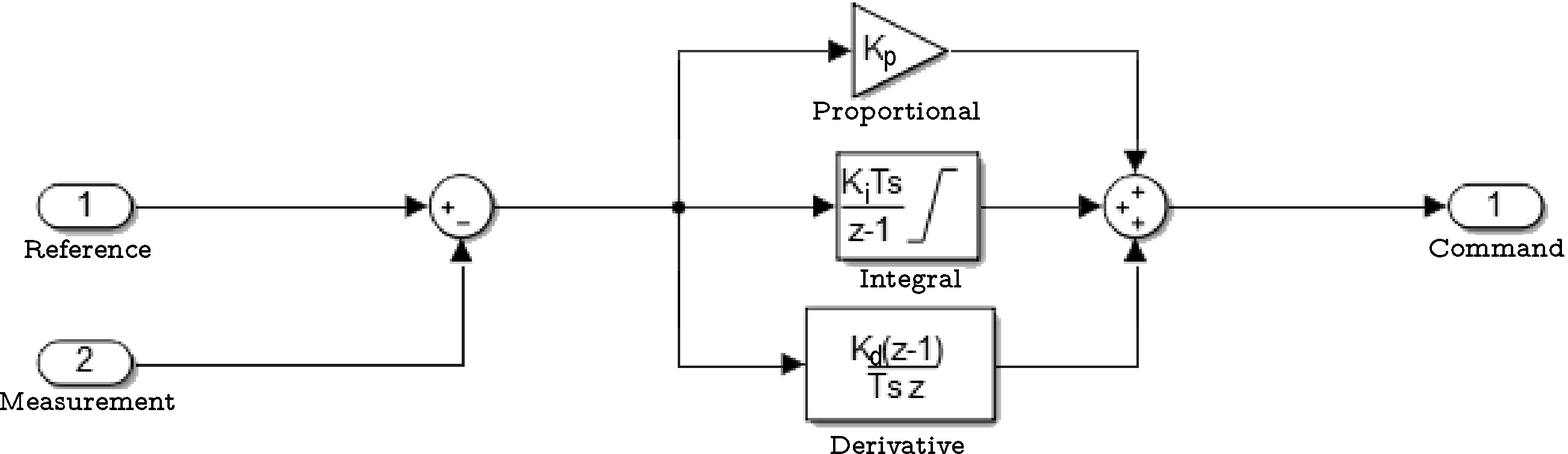
<style>
.page{position:relative;width:1568px;height:454px;background:#ffffff}
.page>*{position:absolute;margin:0}
.t1{font:50.2px "ArialNarrow";color:#000000}
.t2{font:50.2px "LMMonoPropLt10-Bold";color:#000000}
</style>
<div class="page">
<p class="t1" style="left:885px;top:51px;width:11px;height:21px">p</p>
<p class="t2" style="left:813px;top:102px;width:167px;height:24px">Proportional</p>
<p class="t1" style="left:866px;top:183px;width:3px;height:21px">i</p>
<p class="t2" style="left:25px;top:240px;width:125px;height:19px">Reference</p>
<p class="t2" style="left:1430px;top:239px;width:134px;height:19px">Command</p>
<p class="t2" style="left:860px;top:270px;width:101px;height:24px">Integral</p>
<p class="t1" style="left:870px;top:345px;width:11px;height:21px">d</p>
<p class="t2" style="left:0px;top:392px;width:175px;height:19px">Measurement</p>
<p class="t2" style="left:831px;top:436px;width:133px;height:18px">Derivative</p>
</div>
